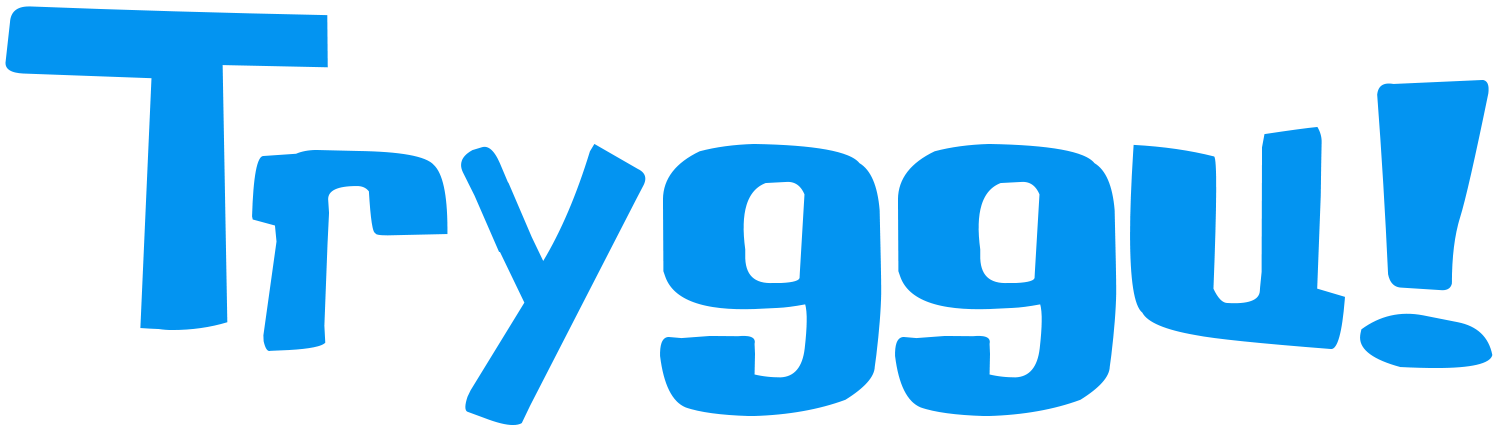
<style>
.page{position:relative;width:1500px;height:435px;background:#ffffff}
.page>*{position:absolute;margin:0}
.t1{font:456.2px "BukaBird";color:#0394f1}
</style>
<div class="page">
<p class="t1" style="left:5px;top:6px;width:1488px;height:419px">Tryggu!</p>
</div>
